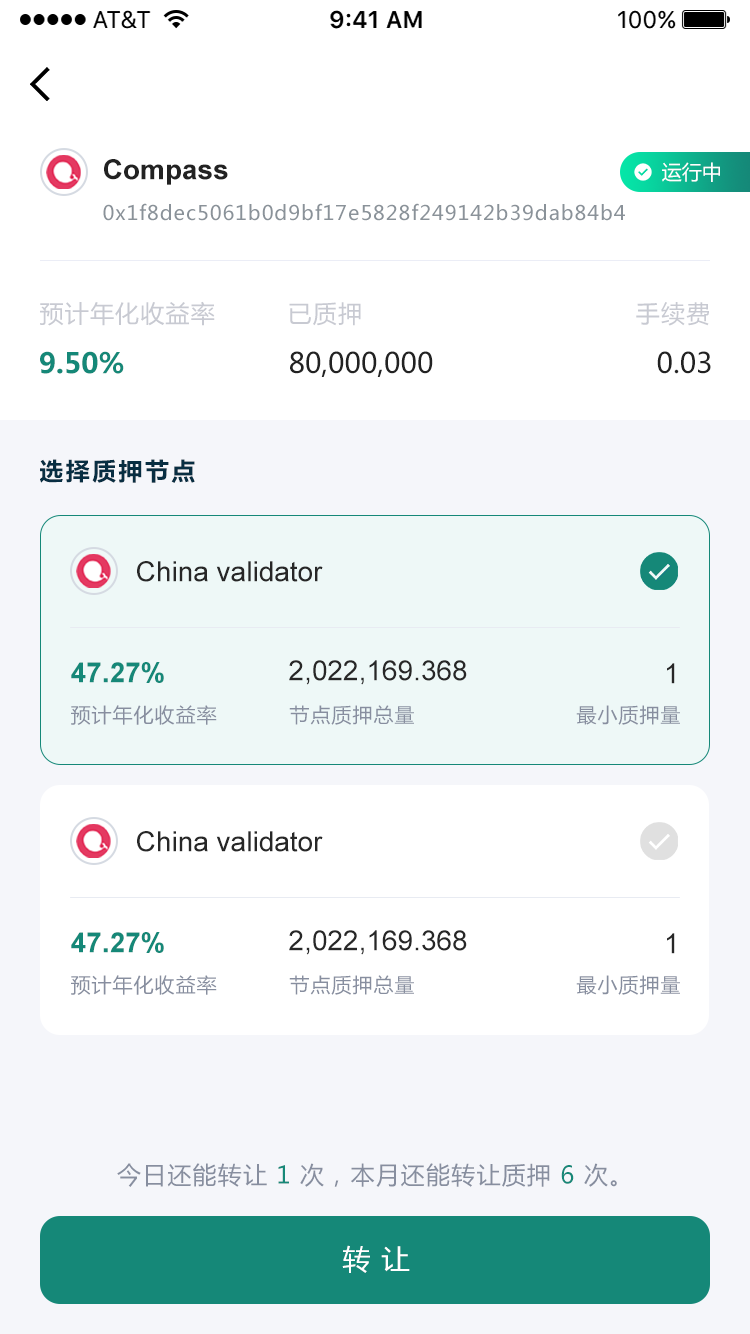
<style>
.page{position:relative;width:750px;height:1334px;background:#ffffff}
.page>*{position:absolute;margin:0}
.t1{font:28px "Arial-BoldMT";color:#222222}
.t2{font:20px "MicrosoftYaHei";color:#ffffff}
.t3{font:20px "MicrosoftYaHei";letter-spacing:0.05em;color:#8a9299}
.t4{font:24px "MicrosoftYaHei";letter-spacing:0.05em;color:#c8cad2}
.t5{font:28px "MicrosoftYaHei-Bold";color:#158878}
.t6{font:28px "MicrosoftYaHei";color:#222222}
.t7{font:24px "MicrosoftYaHei-Bold";letter-spacing:0.1em;color:#082e42}
.t8{font:28px "ArialMT";color:#272727}
.t9{font:28px "Arial-BoldMT";color:#158878}
.t10{font:20px "MicrosoftYaHei";letter-spacing:0.05em;color:#878e9f}
.t11{font:24px "MicrosoftYaHei";letter-spacing:0.05em;color:#878e9f}
.t12{font:24px "MicrosoftYaHei";letter-spacing:0.05em;color:#168878}
.t13{font:28px "MicrosoftYaHei";letter-spacing:0.05em;color:#ffffff}
</style>
<div class="page">
<p class="t1" style="left:104px;top:159px;width:124px;height:26px">Compass</p>
<p class="t2" style="left:662px;top:162px;width:58px;height:20px">运行中</p>
<p class="t3" style="left:103px;top:203px;width:522px;height:18px">0x1f8dec5061b0d9bf17e5828f249142b39dab84b4</p>
<p class="t4" style="left:40px;top:301px;width:175px;height:25px">预计年化收益率</p>
<p class="t4" style="left:289px;top:302px;width:72px;height:24px">已质押</p>
<p class="t4" style="left:636px;top:302px;width:73px;height:24px">手续费</p>
<p class="t5" style="left:40px;top:351px;width:84px;height:23px">9.50%</p>
<p class="t6" style="left:290px;top:351px;width:143px;height:26px">80,000,000</p>
<p class="t6" style="left:657px;top:351px;width:54px;height:23px">0.03</p>
<p class="t7" style="left:40px;top:459px;width:155px;height:24px">选择质押节点</p>
<p class="t8" style="left:137px;top:561px;width:186px;height:21px">China validator</p>
<p class="t9" style="left:71px;top:662px;width:93px;height:21px">47.27%</p>
<p class="t8" style="left:289px;top:660px;width:178px;height:25px">2,022,169.368</p>
<p class="t8" style="left:667px;top:663px;width:8px;height:21px">1</p>
<p class="t10" style="left:71px;top:705px;width:146px;height:20px">预计年化收益率</p>
<p class="t10" style="left:289px;top:705px;width:125px;height:20px">节点质押总量</p>
<p class="t10" style="left:576px;top:705px;width:104px;height:20px">最小质押量</p>
<p class="t8" style="left:137px;top:831px;width:186px;height:21px">China validator</p>
<p class="t9" style="left:71px;top:932px;width:93px;height:21px">47.27%</p>
<p class="t8" style="left:289px;top:930px;width:178px;height:25px">2,022,169.368</p>
<p class="t8" style="left:667px;top:933px;width:8px;height:21px">1</p>
<p class="t10" style="left:71px;top:975px;width:146px;height:20px">预计年化收益率</p>
<p class="t10" style="left:289px;top:975px;width:125px;height:20px">节点质押总量</p>
<p class="t10" style="left:576px;top:975px;width:104px;height:20px">最小质押量</p>
<p class="t11" style="left:117px;top:1163px;width:500px;height:24px">今日还能转让<span class="t12"> 1 </span>次，本月还能转让质押<span class="t12"> 6 </span>次。</p>
<p class="t13" style="left:342px;top:1245px;width:68px;height:28px">转 让</p>
</div>
